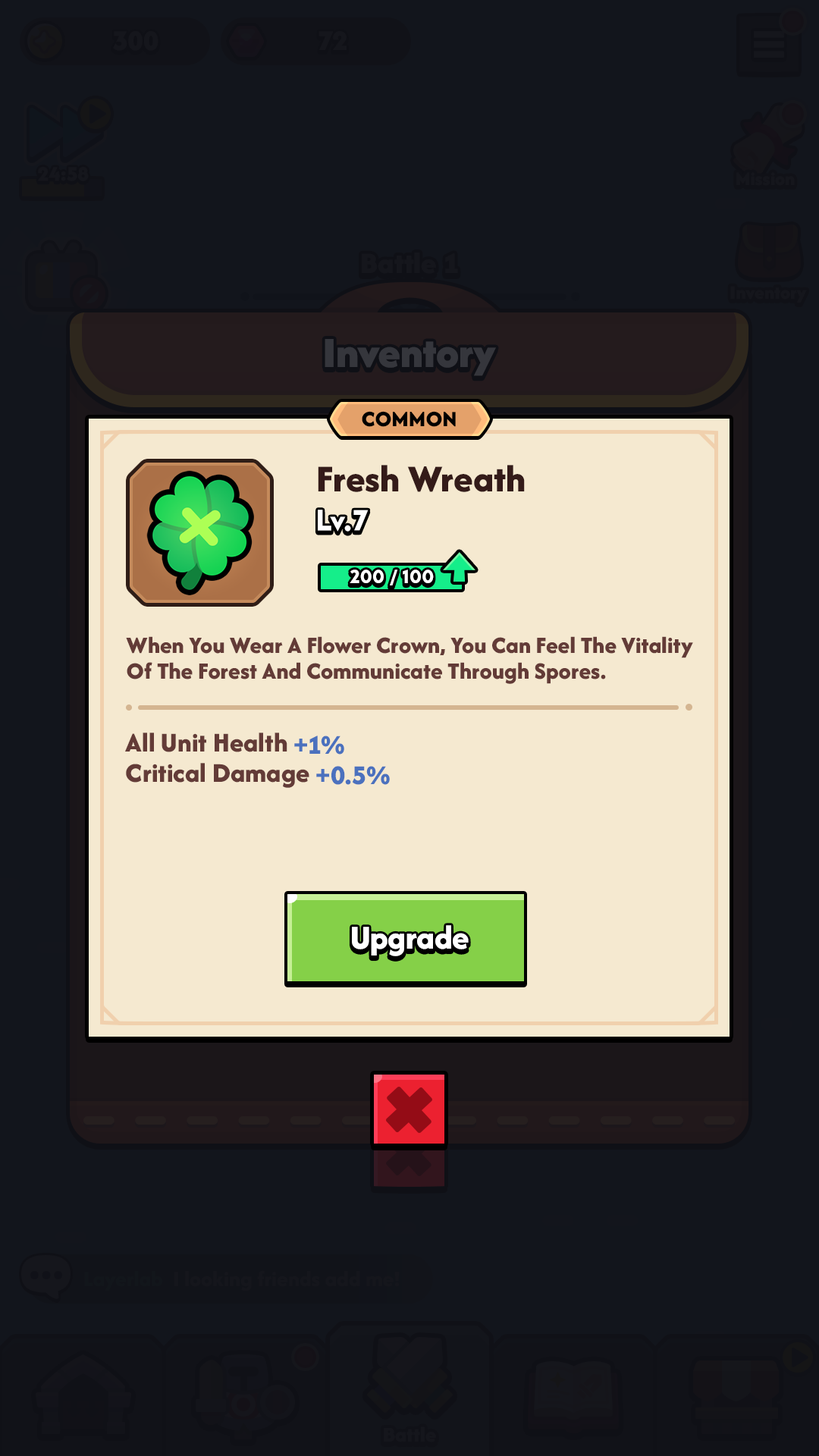
<style>
.page{position:relative;width:819px;height:1456px;background:#12151c}
.page>*{position:absolute;margin:0}
.t1{font:22.7px "AfacadFlux-ExtraBold";color:#000000;text-transform:uppercase}
.t2{font:39.4px "AfacadFlux-ExtraBold";color:#341b19}
.t3{font:30.3px "LTAvocado-Bold";color:#ffffff}
.t4{font:19.7px "LTAvocado-Bold";color:#ffffff;text-transform:uppercase}
.t5{font:24.3px/25.8px "AfacadFlux-ExtraBold";color:#633b37}
.t6{font:28.1px "AfacadFlux-ExtraBold";color:#633b37}
.t7{font:28.1px "AfacadFlux-ExtraBold";color:#4b71be}
.t8{font:34.9px "AfacadFlux-ExtraBold";color:#ffffff}
</style>
<div class="page">
<p class="t1" style="left:362px;top:411px;width:94px;height:16px">Common</p>
<p class="t2" style="left:318px;top:465px;width:207px;height:27px">Fresh Wreath</p>
<p class="t3" style="left:318px;top:510px;width:51px;height:22px">Lv.7</p>
<p class="t4" style="left:350px;top:570px;width:84px;height:15px">200 / 100</p>
<p class="t5" style="left:126px;top:636px;width:567px;height:48px">When You Wear A Flower Crown, You Can Feel The Vitality<br>Of The Forest And Communicate Through Spores.</p>
<p class="t6" style="left:125px;top:733px;width:219px;height:22px">All Unit Health <span class="t7">+1%</span></p>
<p class="t6" style="left:126px;top:763px;width:264px;height:25px">Critical Damage <span class="t7">+0.5%</span></p>
<p class="t8" style="left:352px;top:925px;width:117px;height:31px">Upgrade</p>
</div>
